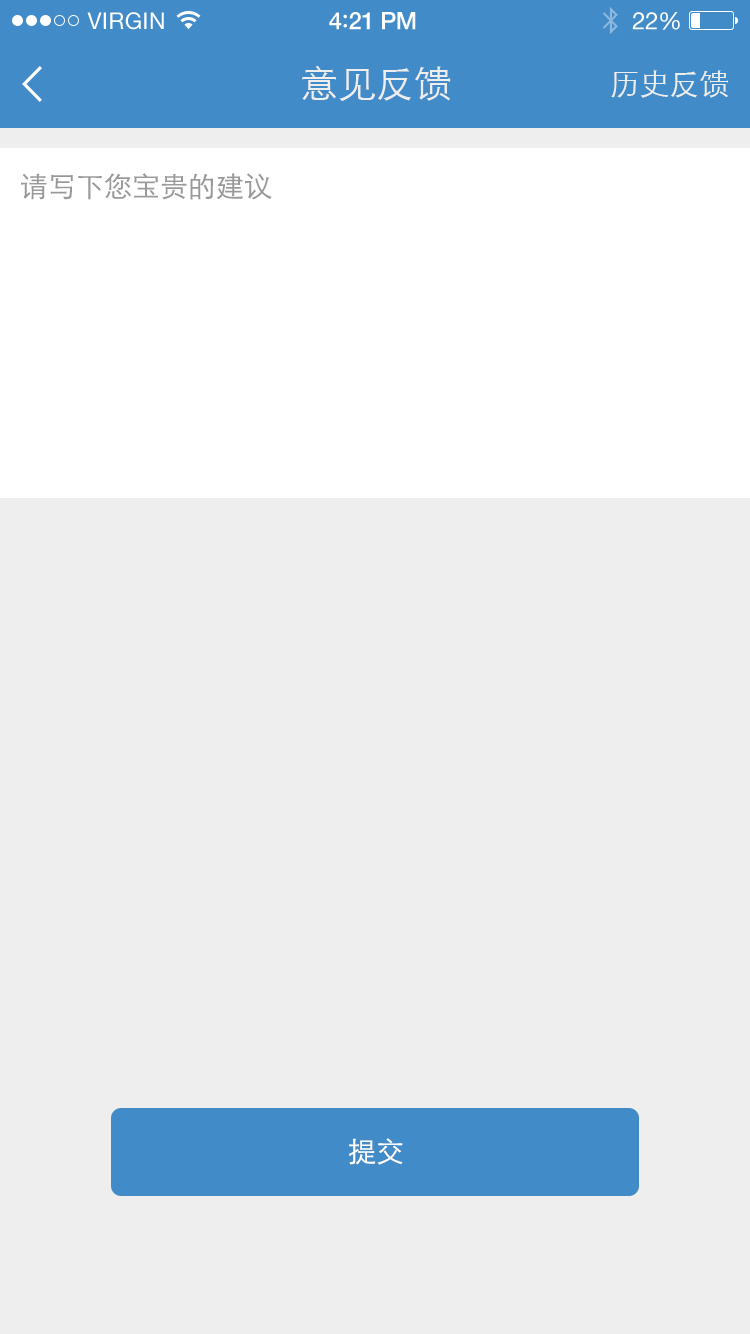
<style>
.page{position:relative;width:750px;height:1334px;background:#eeeeee}
.page>*{position:absolute;margin:0}
.t1{font:23px "HelveticaNeue";letter-spacing:0.02em;color:#ffffff}
.t2{font:24px "HelveticaNeue-Medium";letter-spacing:-0.02em;color:#ffffff}
.t3{font:26px "Avenir-Medium";letter-spacing:-0.02em;color:#ffffff}
.t4{font:24px "HelveticaNeue";letter-spacing:-0.02em;color:#ffffff}
.t5{font:38px "STXihei";color:#eeeeee}
.t6{font:30px "STXihei";color:#eeeeee}
.t7{font:28px "STXihei";color:#999999}
.t8{font:28px "STXihei";color:#ffffff}
</style>
<div class="page">
<p class="t1" style="left:87px;top:12px;width:77px;height:18px">VIRGIN</p>
<p class="t2" style="left:329px;top:12px;width:87px;height:18px">4<span class="t3">:</span>21 PM</p>
<p class="t4" style="left:632px;top:12px;width:48px;height:18px">22%</p>
<p class="t5" style="left:302px;top:65px;width:149px;height:36px">意见反馈</p>
<p class="t6" style="left:611px;top:70px;width:118px;height:28px">历史反馈</p>
<p class="t7" style="left:21px;top:173px;width:251px;height:27px">请写下您宝贵的建议</p>
<p class="t8" style="left:348px;top:1138px;width:55px;height:27px">提交</p>
</div>
